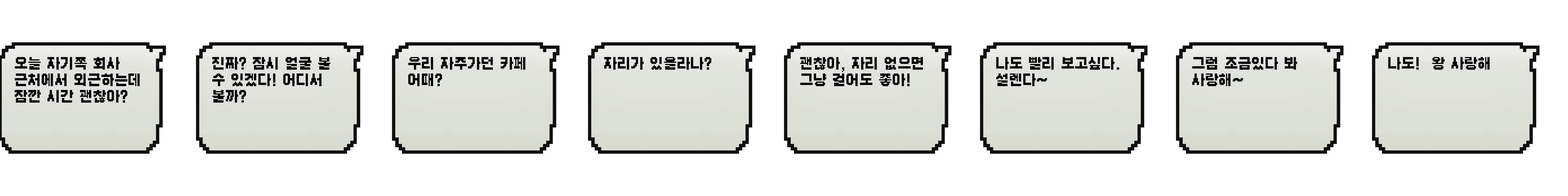
<style>
.page{position:relative;width:1568px;height:196px;background:#ffffff}
.page>*{position:absolute;margin:0}
.t1{font:13.8px "Galmuri11-Bold";color:#000000}
</style>
<div class="page">
<p class="t1" style="left:15px;top:57px;width:125px;height:46px">오늘 자기쪽 회사 근처에서 외근하는데 잠깐 시간 괜찮아?</p>
<p class="t1" style="left:212px;top:57px;width:119px;height:46px">진짜? 잠시 얼굴 볼 수 있겠다! 어디서 볼까?</p>
<p class="t1" style="left:408px;top:57px;width:117px;height:29px">우리 자주가던 카페 어때?</p>
<p class="t1" style="left:604px;top:57px;width:107px;height:13px">자리가 있을라나?</p>
<p class="t1" style="left:800px;top:57px;width:123px;height:29px">괜찮아, 자리 없으면 그냥 걸어도 좋아!</p>
<p class="t1" style="left:996px;top:57px;width:123px;height:29px">나도 빨리 보고싶다. 설렌다~</p>
<p class="t1" style="left:1192px;top:57px;width:105px;height:29px">그럼 조금있다 봐 사랑해~</p>
<p class="t1" style="left:1388px;top:57px;width:102px;height:13px">나도!  왕 사랑해</p>
</div>
